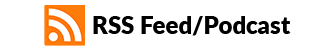
<style>
.page{position:relative;width:335px;height:50px;background:#ffffff}
.page>*{position:absolute;margin:0}
.t1{font:24px "Lato-Black";color:#000000}
</style>
<div class="page">
<p class="t1" style="left:93px;top:16px;width:198px;height:20px">RSS Feed/Podcast</p>
</div>
